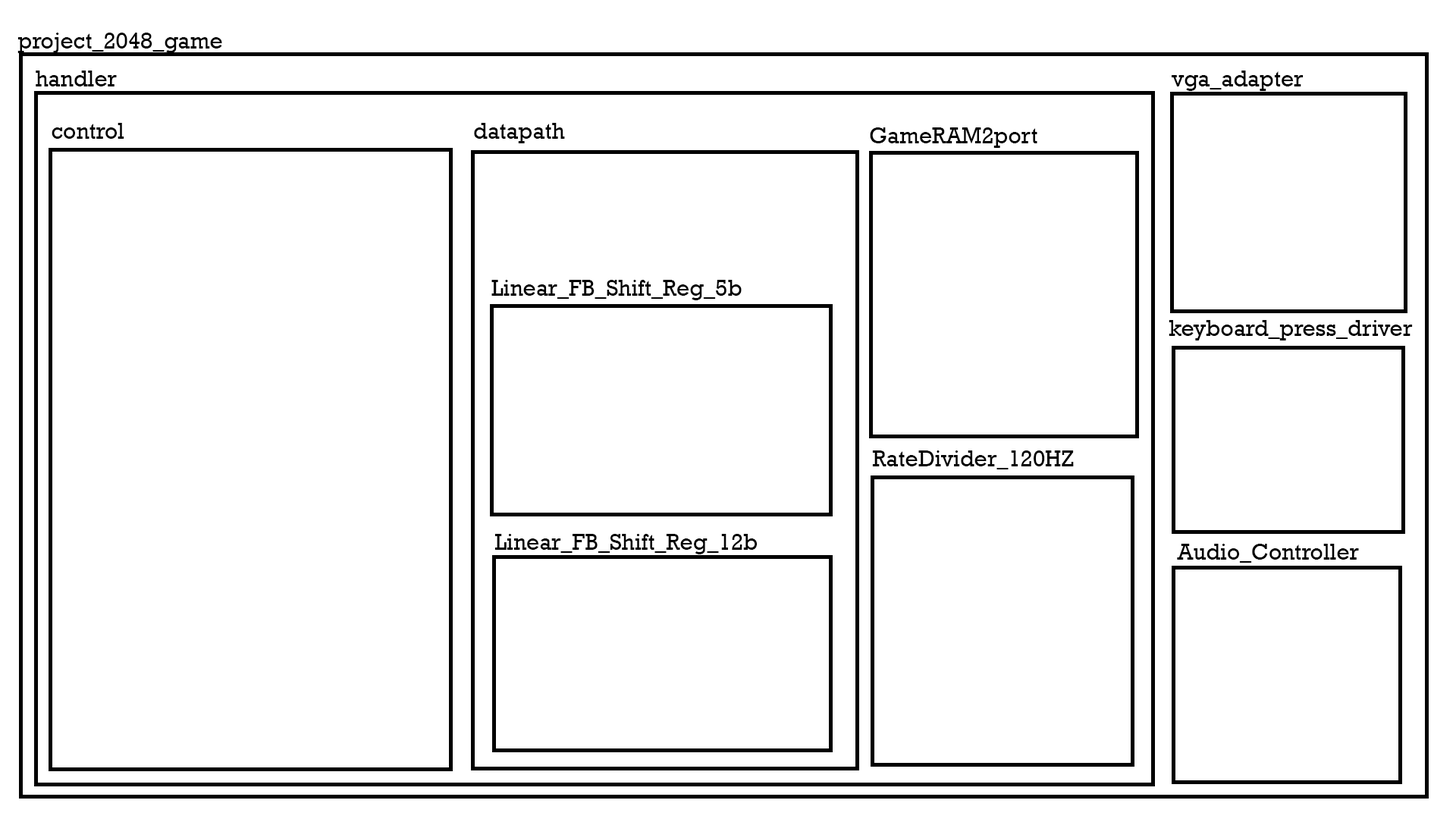
<style>
.page{position:relative;width:1456px;height:819px;background:#ffffff}
.page>*{position:absolute;margin:0}
.t1{font:22.7px "Rockwell";color:#000000}
</style>
<div class="page">
<p class="t1" style="left:17px;top:33px;width:205px;height:20px">project_2048_game</p>
<p class="t1" style="left:36px;top:71px;width:81px;height:15px">handler</p>
<p class="t1" style="left:1172px;top:71px;width:132px;height:20px">vga_adapter</p>
<p class="t1" style="left:52px;top:123px;width:72px;height:16px">control</p>
<p class="t1" style="left:474px;top:123px;width:91px;height:20px">datapath</p>
<p class="t1" style="left:870px;top:127px;width:167px;height:21px">GameRAM2port</p>
<p class="t1" style="left:491px;top:280px;width:251px;height:20px">Linear_FB_Shift_Reg_5b</p>
<p class="t1" style="left:1169px;top:320px;width:244px;height:20px">keyboard_press_driver</p>
<p class="t1" style="left:872px;top:450px;width:202px;height:19px">RateDivider_120HZ</p>
<p class="t1" style="left:494px;top:534px;width:264px;height:20px">Linear_FB_Shift_Reg_12b</p>
<p class="t1" style="left:1177px;top:544px;width:182px;height:19px">Audio_Controller</p>
</div>
